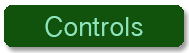
<style>
.page{position:relative;width:189px;height:53px;background:#11530c}
.page>*{position:absolute;margin:0}
.t1{font:24px "BanglaSangamMN";color:#8ce6ba}
</style>
<div class="page">
<p class="t1" style="left:45px;top:16px;width:98px;height:21px">Controls</p>
</div>
